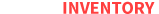
<style>
.page{position:relative;width:159px;height:14px;background:#ffffff}
.page>*{position:absolute;margin:0}
.t1{font:18px "SourceSansPro-Bold";color:#ff3f3f}
.t2{font:18px "SourceSansPro-Bold";color:#ffffff}
</style>
<div class="page">
<p class="t1" style="left:3px;top:1px;width:152px;height:13px"><span class="t2">SISTEM</span>INVENTORY</p>
</div>
